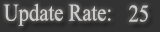
<style>
.page{position:relative;width:160px;height:32px;background:#333333}
.page>*{position:absolute;margin:0}
.t1{font:24px "TimesNewRomanPSMT";color:#cdcbc9;scale:0.86 1}
</style>
<div class="page">
<p class="t1" style="left:3px;top:3px;width:108px;height:23px">Update Rate:</p>
<p class="t1" style="left:129px;top:5px;width:19px;height:17px">25</p>
</div>
